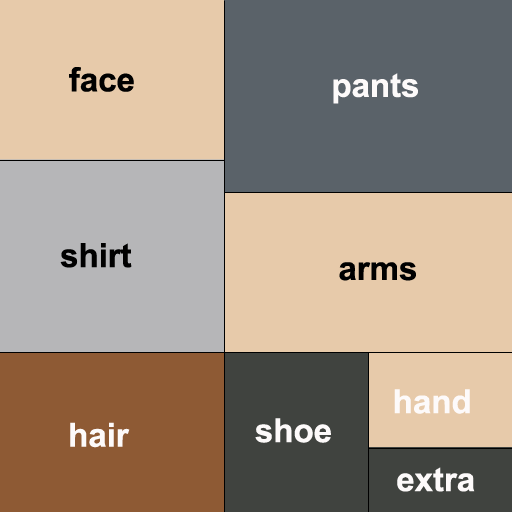
<style>
.page{position:relative;width:512px;height:512px;background:#e7caaa}
.page>*{position:absolute;margin:0}
.t1{font:33.3px "Arial-BoldMT";letter-spacing:-0.005em;color:#000000}
.t2{font:33.3px "Arial-BoldMT";letter-spacing:-0.005em;color:#fdfafa}
</style>
<div class="page">
<p class="t1" style="left:69px;top:67px;width:65px;height:25px">face</p>
<p class="t2" style="left:333px;top:73px;width:85px;height:31px">pants</p>
<p class="t1" style="left:60px;top:243px;width:72px;height:25px">shirt</p>
<p class="t1" style="left:339px;top:262px;width:77px;height:19px">arms</p>
<p class="t2" style="left:394px;top:389px;width:76px;height:25px">hand</p>
<p class="t2" style="left:70px;top:422px;width:60px;height:26px">hair</p>
<p class="t2" style="left:255px;top:418px;width:76px;height:25px">shoe</p>
<p class="t2" style="left:397px;top:467px;width:78px;height:25px">extra</p>
</div>
